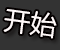
<style>
.page{position:relative;width:60px;height:50px;background:#333333}
.page>*{position:absolute;margin:0}
.t1{font:25.9px "MicrosoftYaHei";color:#fff9f9}
</style>
<div class="page">
<p class="t1" style="left:3px;top:9px;width:54px;height:30px;rotate:8deg">开始</p>
</div>
